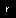
<style>
.page{position:relative;width:16px;height:18px;background:#000000}
.page>*{position:absolute;margin:0}
.t1{font:9px "LucidaGrande";letter-spacing:-0.13em;color:#ffffff}
</style>
<div class="page">
<p class="t1" style="left:6px;top:7px;width:3px;height:5px">r</p>
</div>
